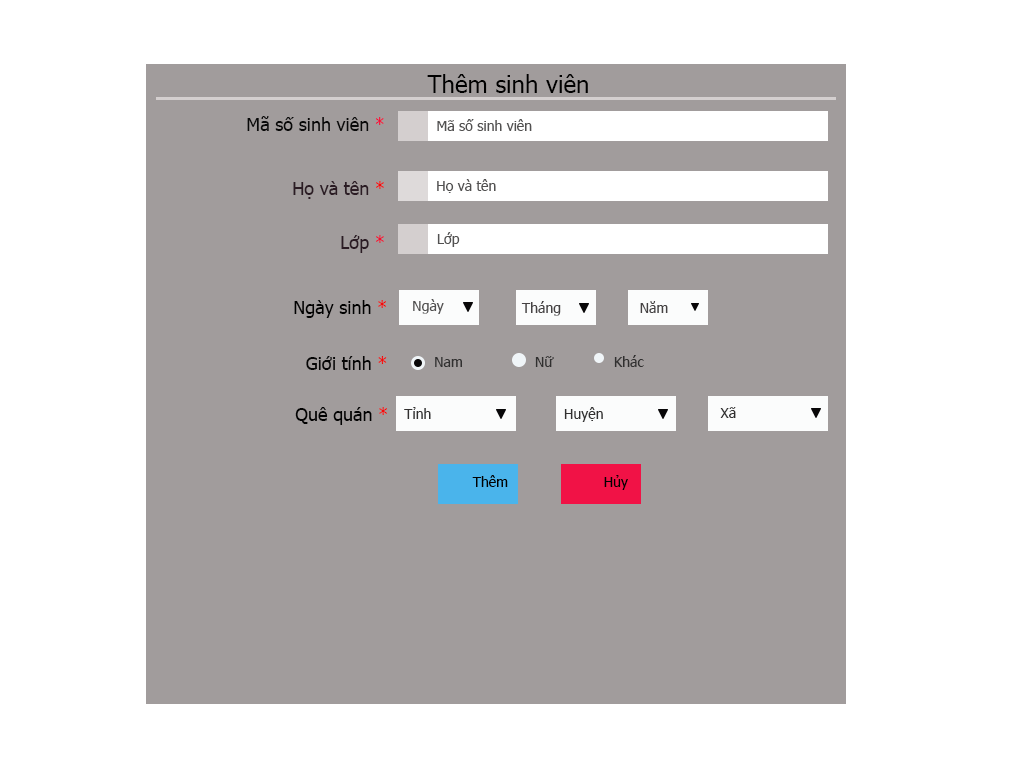
<style>
.page{position:relative;width:1024px;height:768px;background:#a19c9c}
.page>*{position:absolute;margin:0}
.t1{font:24px "Tahoma";color:#000000}
.t2{font:18px "Tahoma";color:#090909}
.t3{font:18px "Tahoma";color:#f70d39}
.t4{font:14px "Tahoma";color:#525151}
.t5{font:18px "Tahoma";color:#2b1c24}
.t6{font:18px "Tahoma";color:#f70606}
.t7{font:18px "Tahoma";color:#f10b31}
.t8{font:18px "Tahoma";color:#010101}
.t9{font:18px "Tahoma";color:#f40909}
.t10{font:14px "Tahoma";color:#454243}
.t11{font:18px "Tahoma";color:#060606}
.t12{font:14px "Tahoma";color:#313030}
.t13{font:18px "Tahoma";color:#020202}
.t14{font:18px "Tahoma";color:#f60909}
.t15{font:14px "Tahoma";color:#020202}
</style>
<div class="page">
<p class="t1" style="left:427px;top:74px;width:161px;height:19px">Thêm sinh viên</p>
<p class="t2" style="left:247px;top:116px;width:137px;height:15px">Mã số sinh viên <span class="t3">*</span></p>
<p class="t4" style="left:437px;top:119px;width:95px;height:12px">Mã số sinh viên</p>
<p class="t5" style="left:293px;top:181px;width:91px;height:18px">Họ và tên <span class="t6">*</span></p>
<p class="t4" style="left:437px;top:179px;width:59px;height:14px">Họ và tên</p>
<p class="t4" style="left:437px;top:232px;width:23px;height:15px">Lớp</p>
<p class="t5" style="left:341px;top:235px;width:43px;height:18px">Lớp <span class="t7">*</span></p>
<p class="t8" style="left:294px;top:300px;width:92px;height:18px">Ngày sinh <span class="t9">*</span></p>
<p class="t4" style="left:413px;top:299px;width:31px;height:15px">Ngày</p>
<p class="t10" style="left:521px;top:301px;width:40px;height:15px">Tháng</p>
<p class="t10" style="left:640px;top:301px;width:28px;height:12px">Năm</p>
<p class="t11" style="left:306px;top:356px;width:81px;height:14px">Giới tính<span class="t9"> *</span></p>
<p class="t12" style="left:435px;top:357px;width:27px;height:10px">Nam</p>
<p class="t12" style="left:535px;top:356px;width:19px;height:11px">Nữ</p>
<p class="t12" style="left:614px;top:355px;width:30px;height:12px">Khác</p>
<p class="t13" style="left:295px;top:407px;width:92px;height:18px">Quê quán <span class="t14">*</span></p>
<p class="t12" style="left:404px;top:407px;width:27px;height:12px">Tỉnh</p>
<p class="t12" style="left:564px;top:407px;width:39px;height:15px">Huyện</p>
<p class="t12" style="left:720px;top:407px;width:16px;height:11px">Xã</p>
<p class="t15" style="left:472px;top:475px;width:36px;height:12px">Thêm</p>
<p class="t15" style="left:604px;top:475px;width:24px;height:15px">Hủy</p>
</div>
